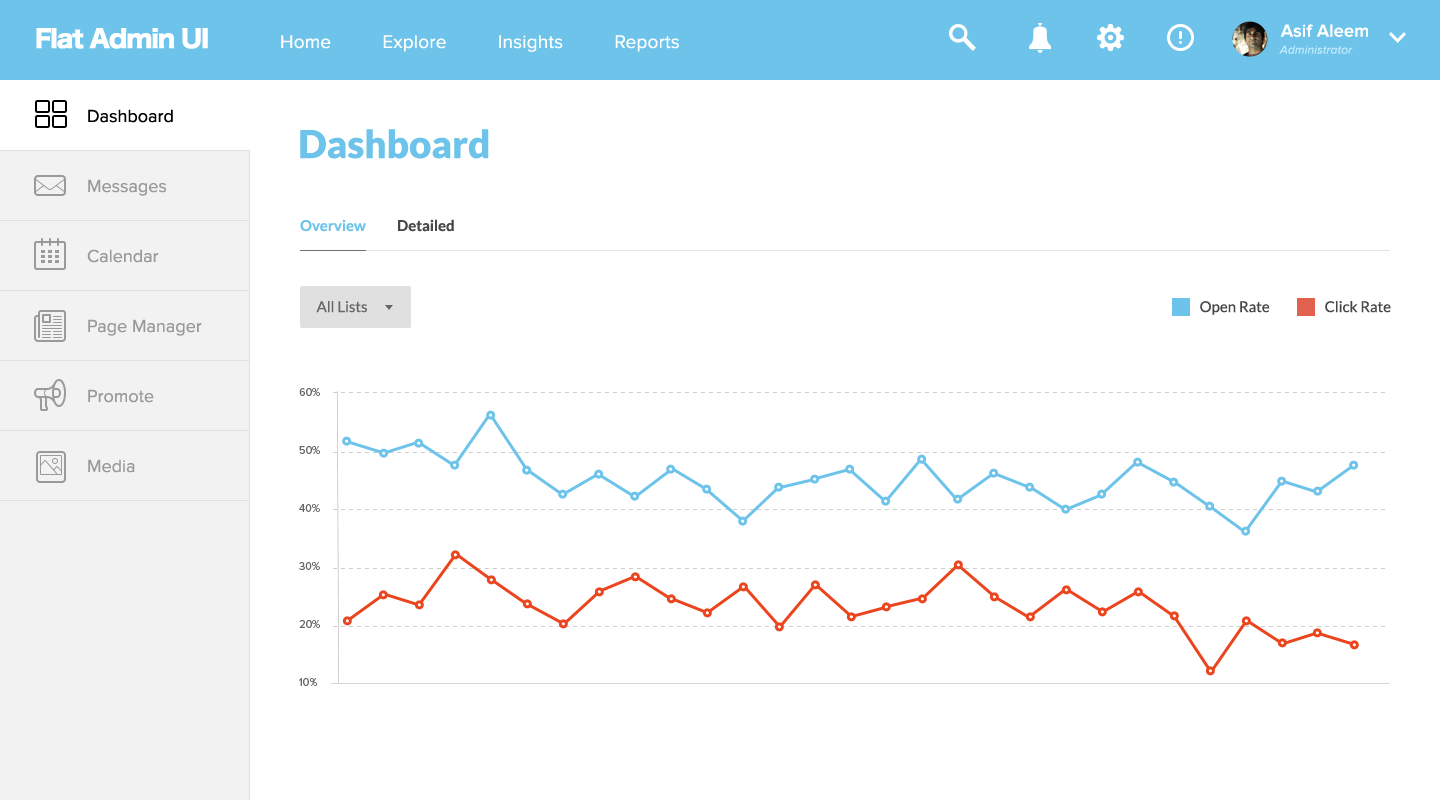
<style>
.page{position:relative;width:1440px;height:800px;background:#ffffff}
.page>*{position:absolute;margin:0}
.t1{font:24px "HiraKakuStdN-W8";letter-spacing:-0.05em;color:#ffffff}
.t2{font:18px "ProximaNova-Semibold";letter-spacing:0.01em;color:#ffffff}
.t3{font:19px "ProximaNova-Regular";letter-spacing:0.01em;color:#ffffff}
.t4{font:12px "ProximaNova-RegularIt";letter-spacing:0.01em;color:#c3eafc}
.t5{font:18px/70px "ProximaNova-Regular";color:#9a9999}
.t6{font:18px/70px "ProximaNova-Regular";color:#000000}
.t7{font:38.4px "Lato-Black";color:#6dc3ea}
.t8{font:15px "Lato-Bold";color:#6dc3ea}
.t9{font:15px "Lato-Bold";color:#474747}
.t10{font:15px "Lato-Regular";color:#676767}
.t11{font:15px "Lato-Regular";color:#474747}
.t12{font:11px/58px "ProximaNova-Regular";color:#676767}
.t13{font:15px "ArialMT";letter-spacing:0.2em;color:#cdcdcd}
</style>
<div class="page">
<p class="t1" style="left:36px;top:28px;width:172px;height:21px">Flat Admin UI</p>
<p class="t2" style="left:1280px;top:24px;width:88px;height:13px">Asif Aleem</p>
<p class="t3" style="left:281px;top:35px;width:398px;height:17px">Home          Explore          Insights          Reports</p>
<p class="t4" style="left:1279px;top:45px;width:74px;height:9px">Administrator</p>
<p class="t5" style="left:87px;top:109px;width:115px;height:364px"><span class="t6">Dashboard<br></span>Messages<br>Calendar<br>Page Manager<br>Promote<br>Media</p>
<p class="t7" style="left:300px;top:129px;width:189px;height:30px">Dashboard</p>
<p class="t8" style="left:300px;top:219px;width:66px;height:13px">Overview</p>
<p class="t9" style="left:398px;top:219px;width:56px;height:13px">Detailed</p>
<p class="t10" style="left:316px;top:301px;width:51px;height:12px">All Lists</p>
<p class="t11" style="left:1200px;top:301px;width:70px;height:14px">Open Rate</p>
<p class="t11" style="left:1325px;top:301px;width:66px;height:12px">Click Rate</p>
<p class="t12" style="left:299px;top:388px;width:21px;height:298px">60%<br>50%<br>40%<br>30%<br>20%<br>10%</p>
<p class="t13" style="left:333px;top:392px;width:1052px;height:1px">------------------------------------------------------------------------------------------------------------------------------------</p>
<p class="t13" style="left:333px;top:452px;width:1052px;height:1px">------------------------------------------------------------------------------------------------------------------------------------</p>
<p class="t13" style="left:333px;top:509px;width:1052px;height:1px">------------------------------------------------------------------------------------------------------------------------------------</p>
<p class="t13" style="left:333px;top:568px;width:1052px;height:1px">------------------------------------------------------------------------------------------------------------------------------------</p>
<p class="t13" style="left:333px;top:626px;width:1052px;height:1px">------------------------------------------------------------------------------------------------------------------------------------</p>
</div>
